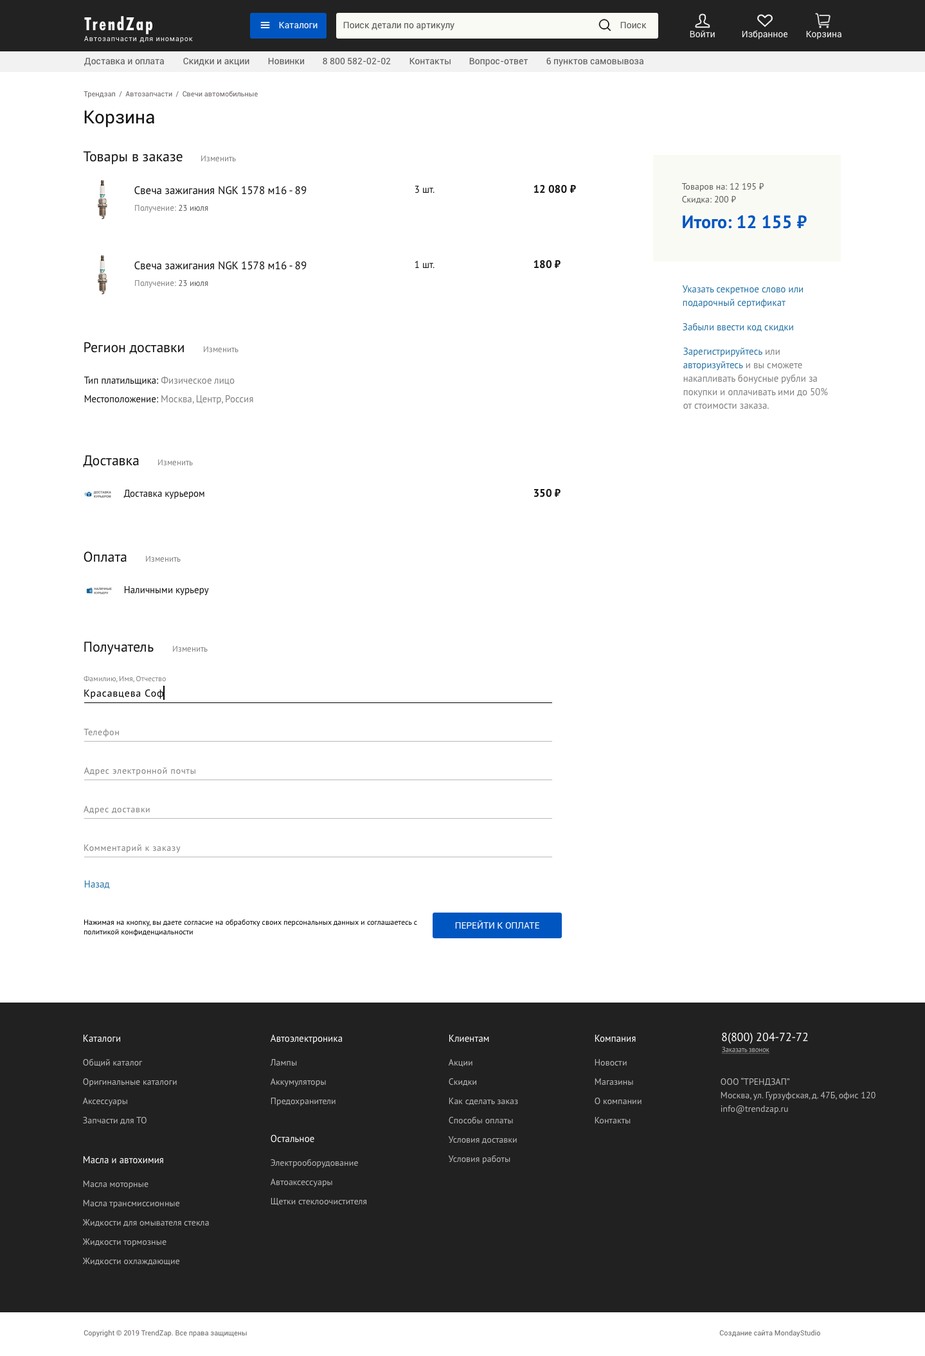
<style>
.page{position:relative;width:925px;height:1356px;background:#ffffff}
.page>*{position:absolute;margin:0}
.t1{font:19.3px "FuturaNewCondBold-Reg";letter-spacing:0.075em;color:#ffffff}
.t2{font:9px "Roboto-Regular";color:#ffffff}
.t3{font:9px "Roboto-Regular";color:#595959}
.t4{font:7.1px "Roboto-Regular";letter-spacing:0.075em;color:#f2f2f2}
.t5{font:9px "Roboto-Regular";color:#f2f2f2}
.t6{font:7.1px "Roboto-Regular";color:#6a6465}
.t7{font:18px "Roboto-Regular";color:#121214}
.t8{font:14.1px "PTSans-Regular";color:#121214}
.t9{font:8.4px "PTSans-Regular";color:#808080}
.t10{font:10.9px "PTSans-Regular";color:#121214}
.t11{font:9.6px "PTSans-Regular";color:#121214}
.t12{font:10.9px "PTSans-Bold";color:#121214}
.t13{font:9px/12.9px "PTSans-Regular";color:#595959}
.t14{font:8.4px "PTSans-Regular";color:#595959}
.t15{font:18px "PTSans-Bold";color:#0056c0}
.t16{font:9.6px/13.5px "PTSans-Regular";color:#2673a5}
.t17{font:9.6px "PTSans-Regular";color:#2673a5}
.t18{font:9.6px/13.5px "PTSans-Regular";color:#808080}
.t19{font:9.6px "PTSans-Regular";color:#808080}
.t20{font:7.7px "PTSans-Regular";color:#808080}
.t21{font:10.3px "PTSans-Regular";letter-spacing:0.05em;color:#000000}
.t22{font:9px "PTSans-Regular";letter-spacing:0.05em;color:#808080}
.t23{font:7.7px/9.6px "PTSans-Regular";color:#000000}
.t24{font:9px "Roboto-Regular";color:#ffffff;text-transform:uppercase}
.t25{font:9.6px "PTSans-Regular";color:#ffffff}
.t26{font:11.6px "PTSans-Regular";color:#ffffff}
.t27{font:7.1px "PTSans-Regular";letter-spacing:-0.025em;color:#bbbbbb;text-decoration:underline}
.t28{font:9px/19.3px "PTSans-Regular";color:#bbbbbb}
.t29{font:9px/13.5px "PTSans-Regular";color:#bbbbbb}
.t30{font:9px/13.5px "PTSans-Regular";color:#bbbbbb;text-transform:uppercase}
</style>
<div class="page">
<p class="t1" style="left:84px;top:16px;width:69px;height:19px">TrendZap</p>
<p class="t2" style="left:279px;top:22px;width:39px;height:7px">Каталоги</p>
<p class="t3" style="left:343px;top:22px;width:112px;height:8px">Поиск детали по артикулу</p>
<p class="t3" style="left:620px;top:22px;width:27px;height:7px">Поиск</p>
<p class="t4" style="left:84px;top:36px;width:109px;height:7px">Автозапчасти для иномарок</p>
<p class="t5" style="left:690px;top:30px;width:25px;height:8px">Войти</p>
<p class="t5" style="left:742px;top:30px;width:46px;height:9px">Избранное</p>
<p class="t5" style="left:806px;top:31px;width:36px;height:8px">Корзина</p>
<p class="t3" style="left:84px;top:58px;width:80px;height:8px">Доставка и оплата</p>
<p class="t3" style="left:183px;top:57px;width:66px;height:9px">Скидки и акции</p>
<p class="t3" style="left:268px;top:58px;width:36px;height:7px">Новинки</p>
<p class="t3" style="left:323px;top:57px;width:68px;height:8px">8 800 582-02-02</p>
<p class="t3" style="left:410px;top:58px;width:41px;height:7px">Контакты</p>
<p class="t3" style="left:469px;top:58px;width:59px;height:8px">Вопрос-ответ</p>
<p class="t3" style="left:546px;top:57px;width:98px;height:9px">6 пунктов самовывоза</p>
<p class="t6" style="left:84px;top:91px;width:174px;height:7px">Трендзап  /  Автозапчасти  /  Свечи автомобильные</p>
<p class="t7" style="left:84px;top:111px;width:70px;height:16px">Корзина</p>
<p class="t8" style="left:83px;top:151px;width:100px;height:14px">Товары в заказе</p>
<p class="t9" style="left:201px;top:155px;width:35px;height:7px">Изменить</p>
<p class="t10" style="left:134px;top:186px;width:173px;height:9px">Свеча зажигания NGK 1578 м16 - 89</p>
<p class="t11" style="left:415px;top:186px;width:20px;height:8px">3 шт.</p>
<p class="t12" style="left:534px;top:184px;width:42px;height:10px">12 080 ₽</p>
<p class="t13" style="left:681px;top:183px;width:83px;height:21px">Товаров на: 12 195 ₽<br>Скидка: 200 ₽</p>
<p class="t9" style="left:135px;top:204px;width:73px;height:9px">Получение: <span class="t14">23 июля</span></p>
<p class="t15" style="left:683px;top:215px;width:124px;height:14px">Итого: 12 155 ₽</p>
<p class="t10" style="left:134px;top:261px;width:173px;height:9px">Свеча зажигания NGK 1578 м16 - 89</p>
<p class="t11" style="left:415px;top:260px;width:20px;height:9px">1 шт.</p>
<p class="t12" style="left:534px;top:260px;width:27px;height:9px">180 ₽</p>
<p class="t9" style="left:135px;top:280px;width:73px;height:8px">Получение: <span class="t14">23 июля</span></p>
<p class="t16" style="left:682px;top:285px;width:121px;height:23px">Указать секретное слово или <br>подарочный сертификат</p>
<p class="t17" style="left:683px;top:323px;width:110px;height:9px">Забыли ввести код скидки</p>
<p class="t8" style="left:84px;top:342px;width:100px;height:12px">Регион доставки</p>
<p class="t9" style="left:204px;top:346px;width:35px;height:7px">Изменить</p>
<p class="t18" style="left:683px;top:347px;width:145px;height:63px"><span class="t16">Зарегистрируйтесь</span> или <span class="t16">авторизуйтесь</span> и вы сможете накапливать бонусные рубли за покупки и оплачивать ими до 50% от стоимости заказа.</p>
<p class="t11" style="left:84px;top:376px;width:151px;height:9px">Тип платильщика: <span class="t19">Физическое лицо</span></p>
<p class="t19" style="left:84px;top:395px;width:169px;height:9px"><span class="t11">Местоположение: </span>Москва, Центр, Россия</p>
<p class="t8" style="left:83px;top:455px;width:56px;height:12px">Доставка</p>
<p class="t9" style="left:158px;top:459px;width:35px;height:7px">Изменить</p>
<p class="t11" style="left:123px;top:490px;width:81px;height:9px">Доставка курьером</p>
<p class="t12" style="left:534px;top:489px;width:27px;height:9px">350 ₽</p>
<p class="t8" style="left:84px;top:552px;width:43px;height:10px">Оплата</p>
<p class="t9" style="left:146px;top:555px;width:35px;height:7px">Изменить</p>
<p class="t11" style="left:124px;top:586px;width:85px;height:9px">Наличными курьеру</p>
<p class="t8" style="left:84px;top:642px;width:70px;height:13px">Получатель</p>
<p class="t9" style="left:173px;top:645px;width:35px;height:7px">Изменить</p>
<p class="t20" style="left:84px;top:676px;width:82px;height:7px">Фамилию, Имя, Отчество</p>
<p class="t21" style="left:84px;top:689px;width:80px;height:10px">Красавцева Соф</p>
<p class="t22" style="left:84px;top:729px;width:35px;height:8px">Телефон</p>
<p class="t22" style="left:84px;top:767px;width:111px;height:9px">Адрес электронной почты</p>
<p class="t22" style="left:84px;top:806px;width:66px;height:9px">Адрес доставки</p>
<p class="t22" style="left:84px;top:845px;width:97px;height:8px">Комментарий к заказу</p>
<p class="t17" style="left:84px;top:881px;width:26px;height:8px">Назад</p>
<p class="t23" style="left:84px;top:919px;width:333px;height:18px">Нажимая на кнопку, вы даете согласие на обработку своих персональных данных и соглашаетесь с <br>политикой конфиденциальности</p>
<p class="t24" style="left:455px;top:921px;width:84px;height:9px">Перейти к оплате</p>
<p class="t25" style="left:83px;top:1035px;width:37px;height:8px">Каталоги</p>
<p class="t25" style="left:270px;top:1034px;width:72px;height:10px">Автоэлектроника</p>
<p class="t25" style="left:449px;top:1035px;width:40px;height:8px">Клиентам</p>
<p class="t25" style="left:595px;top:1035px;width:41px;height:8px">Компания</p>
<p class="t26" style="left:722px;top:1032px;width:86px;height:12px">8(800) 204-72-72</p>
<p class="t27" style="left:721px;top:1047px;width:49px;height:7px">Заказать звонок</p>
<p class="t28" style="left:82px;top:1059px;width:95px;height:66px">Общий каталог<br>Оригинальные каталоги<br>Аксессуары<br>Запчасти для ТО</p>
<p class="t28" style="left:270px;top:1059px;width:66px;height:47px">Лампы<br>Аккумуляторы<br>Предохранители</p>
<p class="t28" style="left:448px;top:1059px;width:70px;height:105px">Акции<br>Скидки<br>Как сделать заказ<br>Способы оплаты<br>Условия доставки<br>Условия работы</p>
<p class="t28" style="left:595px;top:1059px;width:47px;height:65px">Новости<br>Магазины<br>О компании<br>Контакты</p>
<p class="t29" style="left:721px;top:1078px;width:155px;height:36px">ООО “<span class="t30">Трендзап</span>”<br>Москва, ул. Гурзуфская, д. 47Б, офис 120<br>info@trendzap.ru</p>
<p class="t25" style="left:271px;top:1135px;width:43px;height:8px">Остальное</p>
<p class="t25" style="left:83px;top:1156px;width:80px;height:8px">Масла и автохимия</p>
<p class="t28" style="left:270px;top:1159px;width:96px;height:47px">Электрооборудование<br>Автоаксессуары<br>Щетки стеклоочистителя</p>
<p class="t28" style="left:82px;top:1181px;width:127px;height:85px">Масла моторные<br>Масла трансмиссионные<br>Жидкости для омывателя стекла<br>Жидкости тормозные<br>Жидкости охлаждающие</p>
<p class="t6" style="left:84px;top:1330px;width:163px;height:8px">Copyright © 2019 TrendZap. Все права защищены</p>
<p class="t6" style="left:719px;top:1330px;width:101px;height:8px">Создание сайта MondayStudio</p>
</div>
